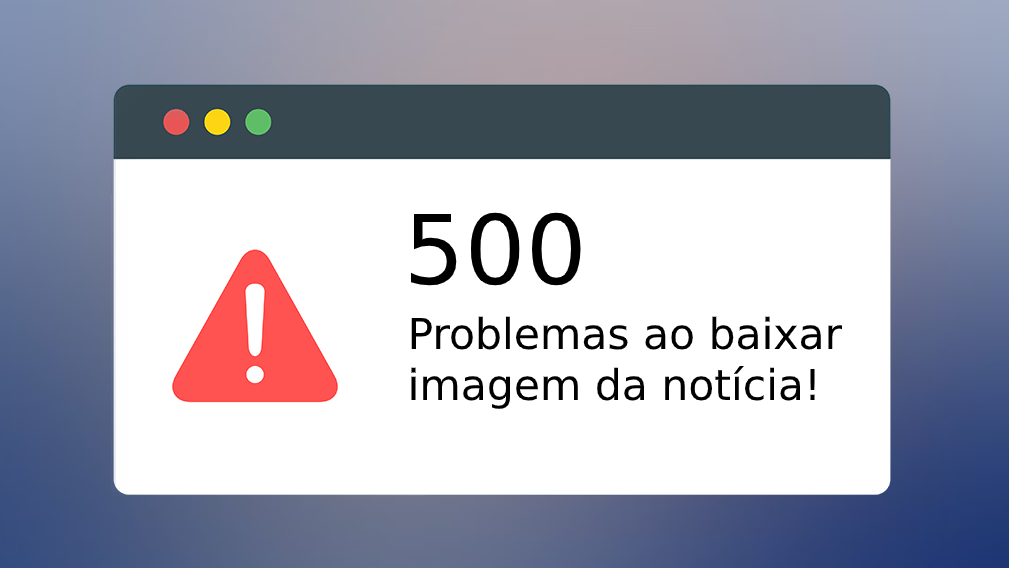
<style>
.page{position:relative;width:1009px;height:568px;background:#ffffff}
.page>*{position:absolute;margin:0}
.t1{font:96px "DejaVuSans";color:#000000}
.t2{font:42.5px "DejaVuSans";color:#000000}
</style>
<div class="page">
<p class="t1" style="left:410px;top:212px;width:171px;height:74px">500</p>
<p class="t2" style="left:411px;top:316px;width:432px;height:93px">Problemas ao baixar<br>imagem da notícia!</p>
</div>
